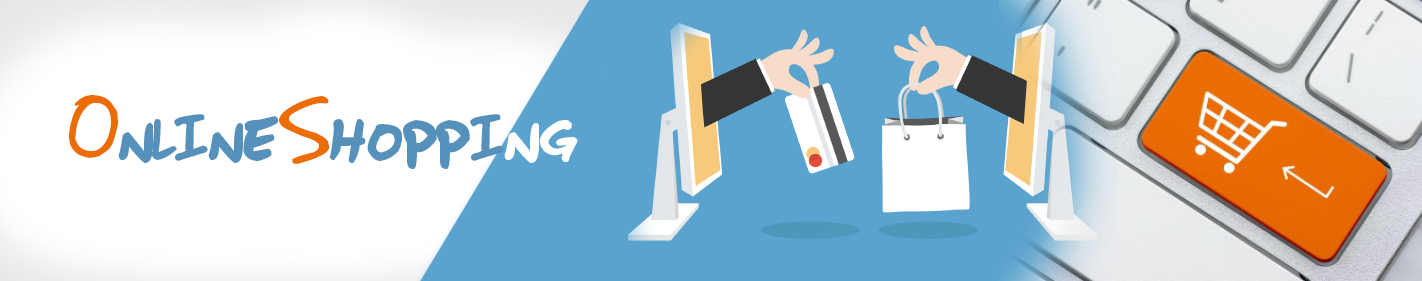
<style>
.page{position:relative;width:1422px;height:281px;background:#5aa3ce}
.page>*{position:absolute;margin:0}
.t1{font:72px "AbjectFailure";color:#5691bb}
.t2{font:72px "AbjectFailure";color:#eb6c03}
.t3{font:72px "AbjectFailure";color:#ec6d04}
.t4{font:72px "AbjectFailure";color:#ffffff}
</style>
<div class="page">
<p class="t1" style="left:69px;top:95px;width:509px;height:74px"><span class="t2">O</span>nline<span class="t3">S</span>hoppi<span class="t4">ng</span></p>
</div>
